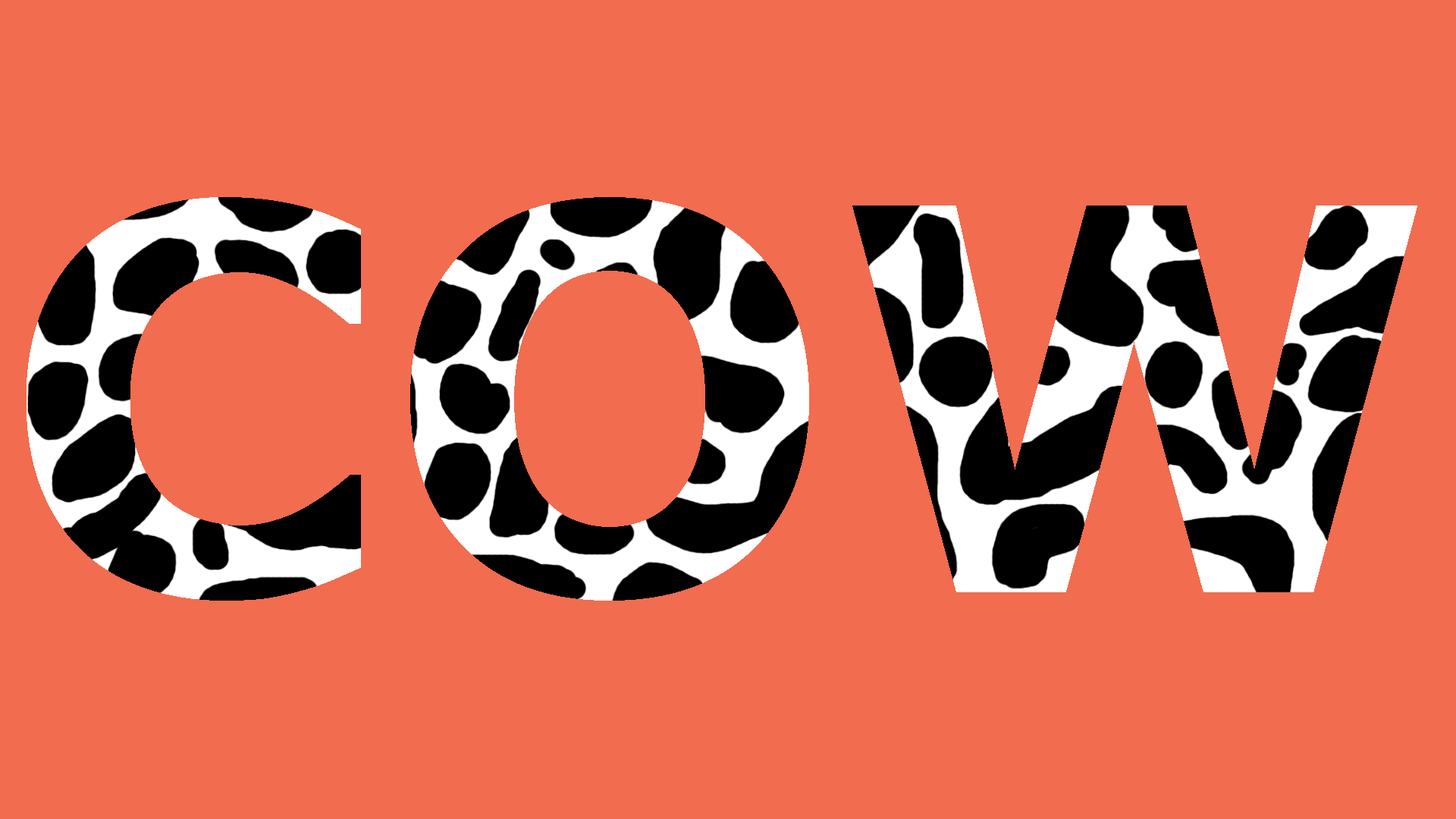
<style>
.page{position:relative;width:1456px;height:819px;background:#f26c4f}
.page>*{position:absolute;margin:0}
.t1{font:530.8px "Verdana-Bold"}
</style>
<div class="page">
<p class="t1" style="left:27px;top:197px;width:1390px;height:404px">COW</p>
</div>
